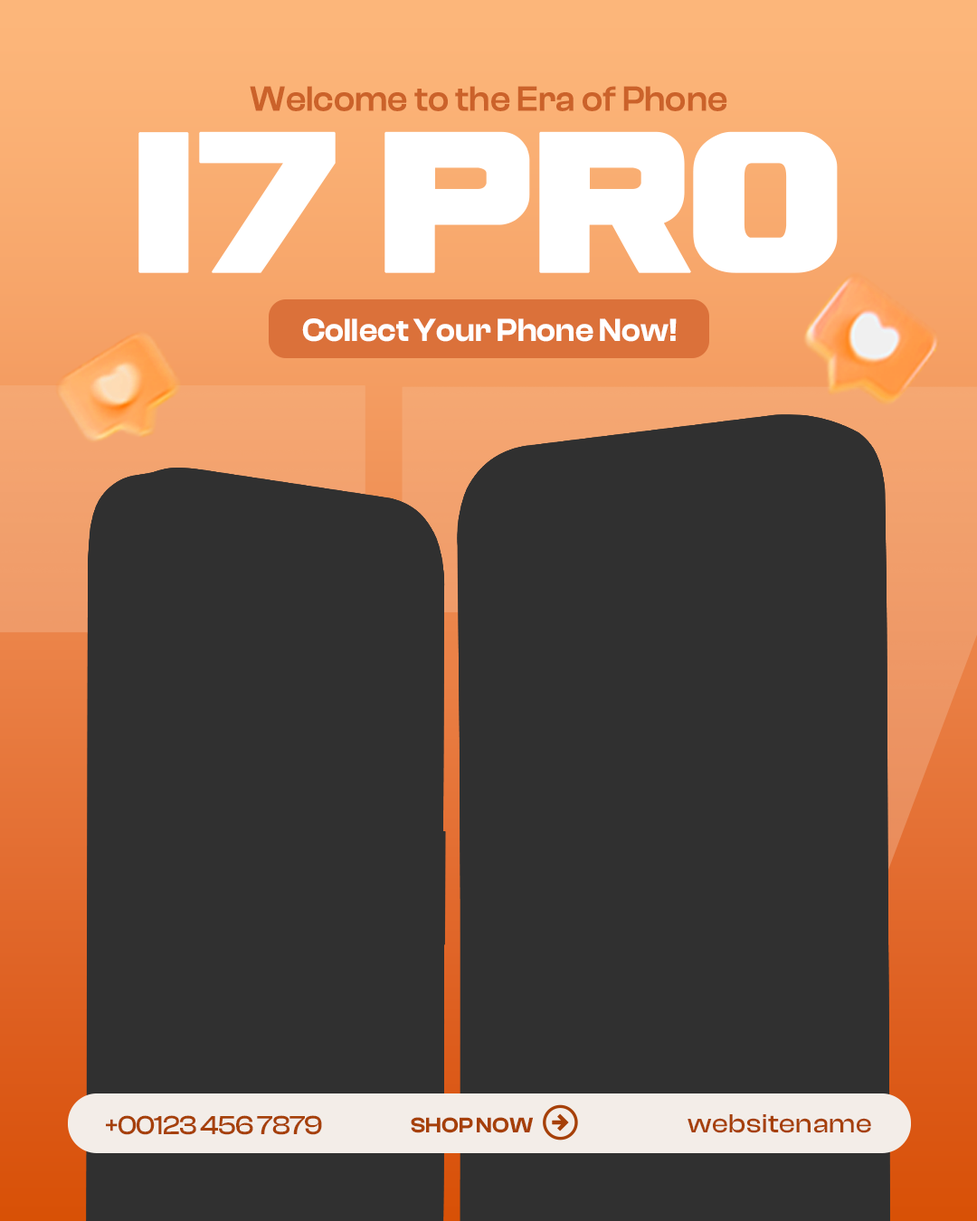
<style>
.page{position:relative;width:977px;height:1221px;background:#303030}
.page>*{position:absolute;margin:0}
.t1{font:35.7px "ClashDisplay-Medium";color:#cb622a;font-weight:bold;scale:0.92 1}
.t2{font:155.7px "Ash";letter-spacing:-0.05em;color:#ffffff;font-weight:bold;scale:0.92 1}
.t3{font:155.7px "Ash";letter-spacing:-0.19em;color:#ffffff;font-weight:bold;scale:0.92 1}
.t4{font:155.7px "Ash";letter-spacing:-0.1em;color:#ffffff;font-weight:bold;scale:0.92 1}
.t5{font:33.2px "ClashDisplay-Semibold";letter-spacing:0.01em;color:#ffffff;scale:0.92 1}
.t6{font:27.1px "ClashDisplay-Medium";letter-spacing:-0.025em;color:#a64008}
.t7{font:21.9px "ClashDisplay-Semibold";color:#a64008;text-transform:uppercase}
.t8{font:27.1px "ClashDisplay-Medium";letter-spacing:0.02em;color:#a64008}
</style>
<div class="page">
<p class="t1" style="left:250px;top:86px;width:477px;height:25px">Welcome to the Era of Phone</p>
<p class="t2" style="left:138px;top:131px;width:699px;height:142px"><span class="t3">1</span>7 P<span class="t4">r</span>o</p>
<p class="t5" style="left:302px;top:318px;width:374px;height:24px">Collect Your Phone Now!</p>
<p class="t6" style="left:106px;top:1115px;width:216px;height:20px">+00123 456 7879</p>
<p class="t7" style="left:411px;top:1117px;width:123px;height:16px">Shop NOW</p>
<p class="t8" style="left:687px;top:1114px;width:184px;height:19px">websitename</p>
</div>
